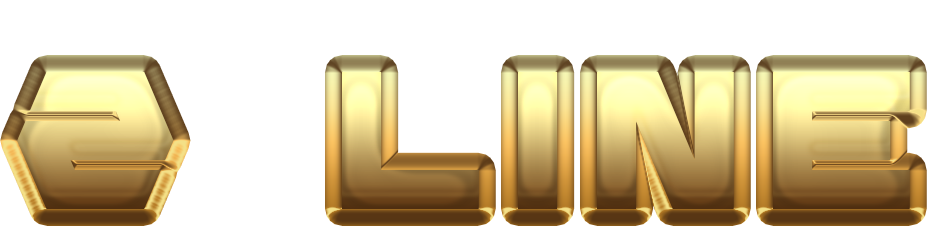
<style>
.page{position:relative;width:950px;height:238px;background:#ffffff}
.page>*{position:absolute;margin:0}
.t1{font:200px "Diagon";letter-spacing:0.15em}
</style>
<div class="page">
<p class="t1" style="left:17px;top:72px;width:893px;height:137px">2  LINE</p>
</div>
